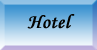
<style>
.page{position:relative;width:97px;height:50px}
.page>*{position:absolute;margin:0}
.t1{font:20px "MonotypeCorsiva";color:#030300;font-weight:bold}
</style>
<div class="page">
<p class="t1" style="left:27px;top:14px;width:48px;height:15px">Hotel</p>
</div>
